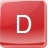
<style>
.page{position:relative;width:48px;height:48px}
.page>*{position:absolute;margin:0}
.t1{font:24px "Helvetica";color:#ffffff}
</style>
<div class="page">
<p class="t1" style="left:16px;top:15px;width:16px;height:18px">D</p>
</div>
